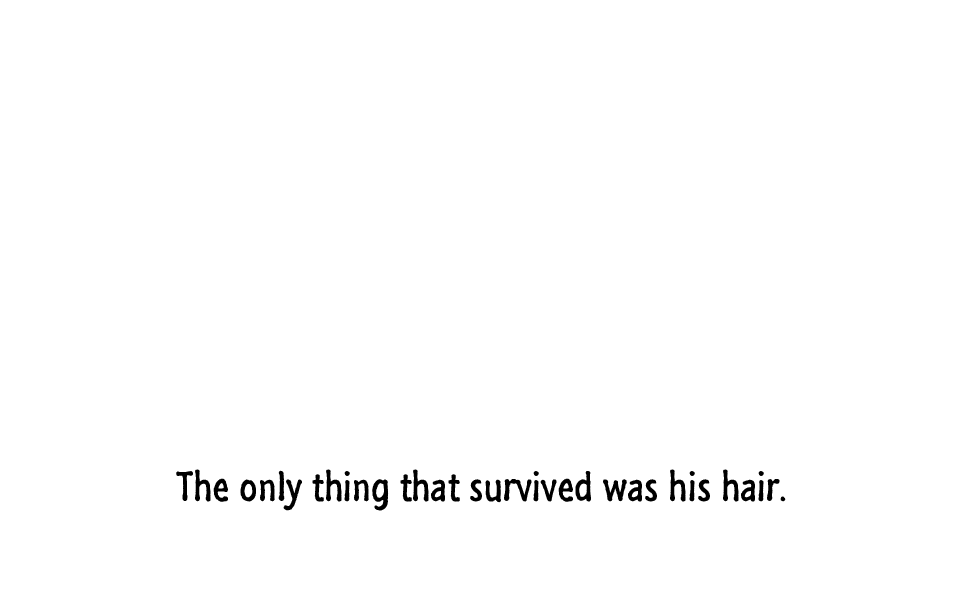
<style>
.page{position:relative;width:960px;height:600px;background:#ffffff}
.page>*{position:absolute;margin:0}
.t1{font:42px "SegoeMarker";color:#000000}
</style>
<div class="page">
<p class="t1" style="left:176px;top:469px;width:610px;height:42px">The only thing that survived was his hair.</p>
</div>
